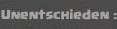
<style>
.page{position:relative;width:117px;height:29px}
.page>*{position:absolute;margin:0}
.t1{font:10px "Supercell-Magic";color:#a9a2a2}
</style>
<div class="page">
<p class="t1" style="left:1px;top:9px;width:116px;height:11px">Unentschieden :</p>
</div>
